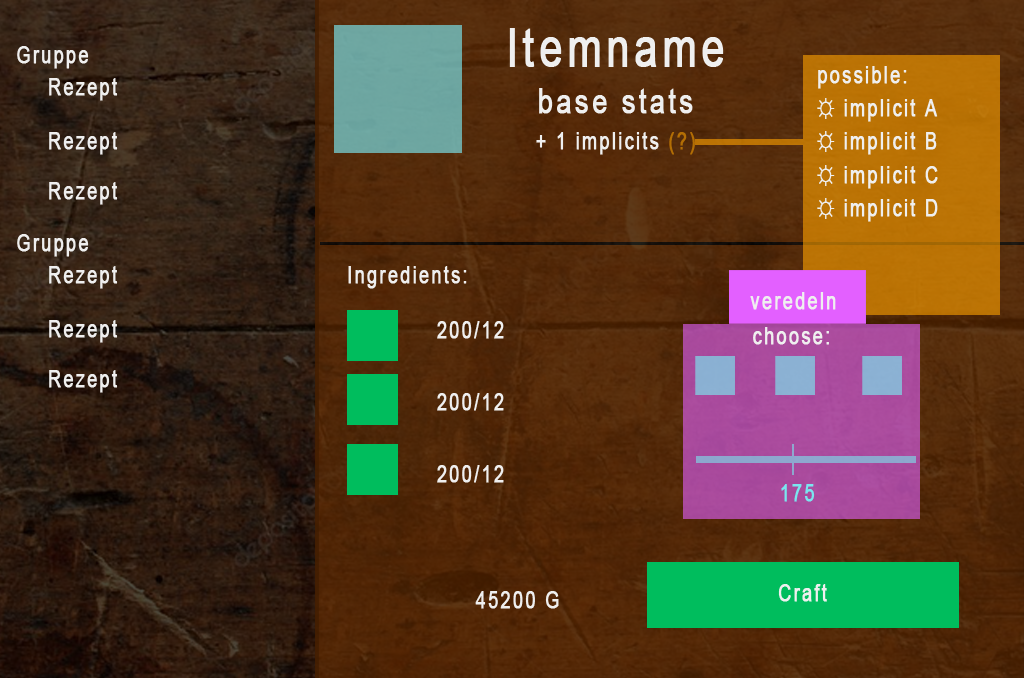
<style>
.page{position:relative;width:1024px;height:678px}
.page>*{position:absolute;margin:0}
.t1{font:52.6px "ArialMT";letter-spacing:0.1em;color:#efefef;font-weight:bold;scale:0.78 1}
.t2{font:23.3px "ArialMT";letter-spacing:0.1em;color:#efefef;font-weight:bold;scale:0.78 1}
.t3{font:23.3px/33.3px "ArialMT";letter-spacing:0.1em;color:#efefef;font-weight:bold;scale:0.78 1}
.t4{font:35px "ArialMT";letter-spacing:0.1em;color:#efefef;font-weight:bold;scale:0.78 1}
.t5{font:23.3px "ArialMT";letter-spacing:0.1em;color:#b36e04;font-weight:bold;scale:0.78 1}
.t6{font:23.3px "ArialMT";letter-spacing:0.1em;color:#7ae6ef;font-weight:bold;scale:0.78 1}
</style>
<div class="page">
<p class="t1" style="left:509px;top:28px;width:215px;height:39px">Itemname</p>
<p class="t2" style="left:17px;top:46px;width:72px;height:23px">Gruppe</p>
<p class="t2" style="left:49px;top:78px;width:69px;height:23px">Rezept</p>
<p class="t3" style="left:817px;top:66px;width:121px;height:156px">possible:<br>☼ implicit A<br>☼ implicit B<br>☼ implicit C<br>☼ implicit D</p>
<p class="t4" style="left:539px;top:88px;width:154px;height:26px">base stats</p>
<p class="t2" style="left:49px;top:132px;width:69px;height:23px">Rezept</p>
<p class="t2" style="left:536px;top:132px;width:159px;height:23px">+ 1 implicits <span class="t5">(?)</span></p>
<p class="t2" style="left:49px;top:182px;width:69px;height:23px">Rezept</p>
<p class="t2" style="left:17px;top:234px;width:72px;height:23px">Gruppe</p>
<p class="t2" style="left:49px;top:266px;width:69px;height:23px">Rezept</p>
<p class="t2" style="left:348px;top:266px;width:119px;height:23px">Ingredients:</p>
<p class="t2" style="left:750px;top:292px;width:86px;height:18px">veredeln</p>
<p class="t2" style="left:49px;top:320px;width:69px;height:23px">Rezept</p>
<p class="t2" style="left:437px;top:321px;width:67px;height:18px">200/12</p>
<p class="t2" style="left:753px;top:327px;width:76px;height:18px">choose:</p>
<p class="t2" style="left:49px;top:370px;width:69px;height:23px">Rezept</p>
<p class="t2" style="left:437px;top:393px;width:67px;height:18px">200/12</p>
<p class="t2" style="left:437px;top:465px;width:67px;height:18px">200/12</p>
<p class="t6" style="left:781px;top:484px;width:34px;height:18px">175</p>
<p class="t2" style="left:475px;top:591px;width:84px;height:18px">45200 G</p>
<p class="t2" style="left:778px;top:584px;width:49px;height:18px">Craft</p>
</div>
